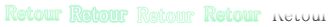
<style>
.page{position:relative;width:335px;height:27px;background:#ffffff}
.page>*{position:absolute;margin:0}
.t1{font:20.9px "MS-PMincho";font-weight:bold;scale:0.93 1}
.t2{font:20.9px "MS-PMincho";color:#ffffff;font-weight:bold;scale:0.93 1}
.t3{font:20.9px "MS-PMincho";color:#ddfbe1;font-weight:bold;scale:0.93 1}
</style>
<div class="page">
<p class="t1" style="left:5px;top:5px;width:57px;height:16px">Retour</p>
<p class="t2" style="left:70px;top:6px;width:57px;height:16px">Retour</p>
<p class="t3" style="left:204px;top:6px;width:57px;height:16px">Retour</p>
<p class="t1" style="left:272px;top:6px;width:57px;height:16px">Retour</p>
</div>
